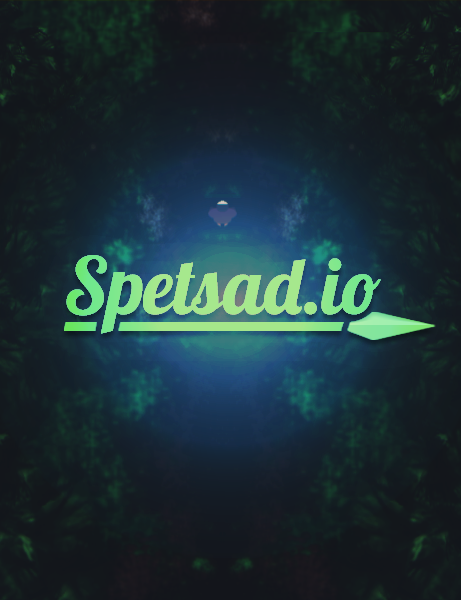
<style>
.page{position:relative;width:461px;height:600px}
.page>*{position:absolute;margin:0}
.t1{font:78.1px "Lobster-Regular"}
</style>
<div class="page">
<p class="t1" style="left:66px;top:255px;width:315px;height:79px">Spetsad.io</p>
</div>
